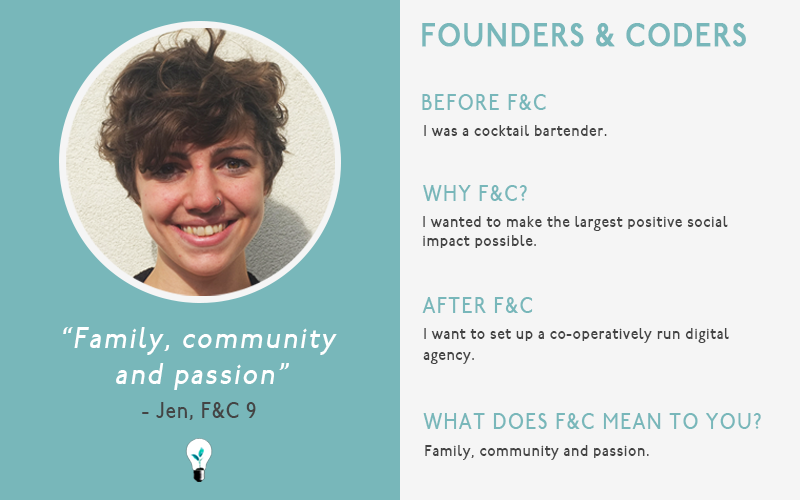
<style>
.page{position:relative;width:800px;height:500px;background:#f5f5f5}
.page>*{position:absolute;margin:0}
.t1{font:32px "P22UndergroundMedium";letter-spacing:0.05em;color:#78b7ba;font-weight:bold;scale:0.86 1}
.t2{font:22px "P22UndergroundMedium";letter-spacing:0.075em;color:#78b7ba;scale:0.86 1}
.t3{font:16px "P22UndergroundMedium";letter-spacing:0.05em;color:#444444;scale:0.86 1}
.t4{font:30px "P22UndergroundMedium";letter-spacing:0.075em;color:#ffffff;font-style:italic;scale:0.86 1}
.t5{font:22px "P22UndergroundMedium";letter-spacing:0.05em;color:#444444;scale:0.86 1}
</style>
<div class="page">
<p class="t1" style="left:422px;top:23px;width:324px;height:24px">FOUNDERS &amp; CODERS</p>
<p class="t2" style="left:422px;top:94px;width:124px;height:16px">BEFORE F&amp;C</p>
<p class="t3" style="left:424px;top:125px;width:183px;height:11px">I was a cocktail bartender.</p>
<p class="t2" style="left:423px;top:185px;width:104px;height:16px">WHY F&amp;C?</p>
<p class="t3" style="left:423px;top:216px;width:305px;height:32px">I wanted to make the largest positive social <br>impact possible.</p>
<p class="t2" style="left:422px;top:297px;width:111px;height:16px">AFTER F&amp;C</p>
<p class="t4" style="left:63px;top:327px;width:274px;height:63px;text-align:center">“Family, community <br>and passion”</p>
<p class="t3" style="left:423px;top:328px;width:306px;height:36px">I want to set up a co-operatively run digital <br>agency.</p>
<p class="t5" style="left:142px;top:402px;width:114px;height:18px">- Jen, F&amp;C 9</p>
<p class="t2" style="left:423px;top:413px;width:338px;height:16px">WHAT DOES F&amp;C MEAN TO YOU?</p>
<p class="t3" style="left:425px;top:445px;width:224px;height:15px">Family, community and passion.</p>
</div>
